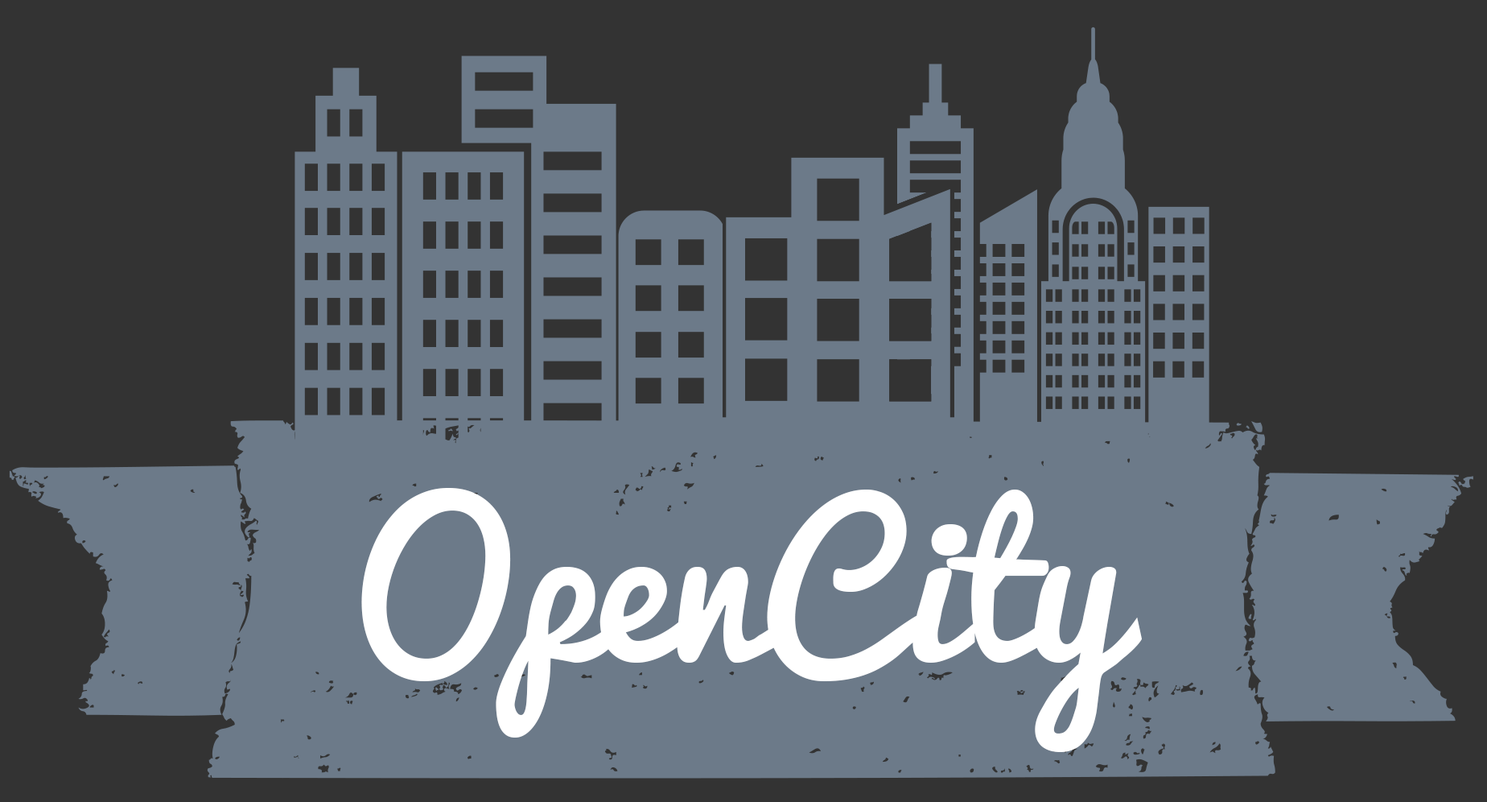
<style>
.page{position:relative;width:1487px;height:802px;background:#333333}
.page>*{position:absolute;margin:0}
.t1{font:197.8px "Pacifico";color:#ffffff}
</style>
<div class="page">
<p class="t1" style="left:361px;top:488px;width:781px;height:264px">OpenCity</p>
</div>
